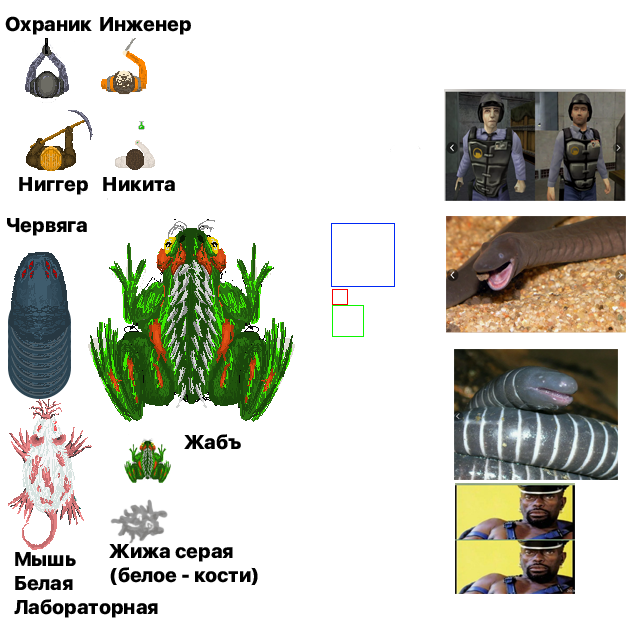
<style>
.page{position:relative;width:640px;height:640px;background:#ffffff}
.page>*{position:absolute;margin:0}
.t1{font:20px "SFProDisplay-Heavy";color:#000000}
</style>
<div class="page">
<p class="t1" style="left:5px;top:16px;width:87px;height:19px">Охраник</p>
<p class="t1" style="left:100px;top:17px;width:91px;height:18px">Инженер</p>
<p class="t1" style="left:19px;top:177px;width:69px;height:18px">Ниггер</p>
<p class="t1" style="left:103px;top:177px;width:72px;height:15px">Никита</p>
<p class="t1" style="left:7px;top:218px;width:80px;height:18px">Червяга</p>
<p class="t1" style="left:184px;top:434px;width:57px;height:16px">Жабъ</p>
<p class="t1" style="left:109px;top:543px;width:149px;height:43px">Жижа серая<br>(белое - кости)</p>
<p class="t1" style="left:14px;top:552px;width:144px;height:66px">Мышь<br>Белая<br>Лабораторная</p>
</div>
